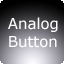
<style>
.page{position:relative;width:64px;height:64px}
.page>*{position:absolute;margin:0}
.t1{font:14.9px "Verdana";color:#ffffff}
</style>
<div class="page">
<p class="t1" style="left:8px;top:17px;width:50px;height:31px">Analog<br>Button</p>
</div>
